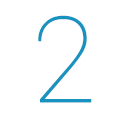
<style>
.page{position:relative;width:128px;height:128px;background:#ffffff}
.page>*{position:absolute;margin:0}
.t1{font:120px "Roboto-Thin";color:#1892bf}
</style>
<div class="page">
<p class="t1" style="left:38px;top:15px;width:54px;height:88px">2</p>
</div>
